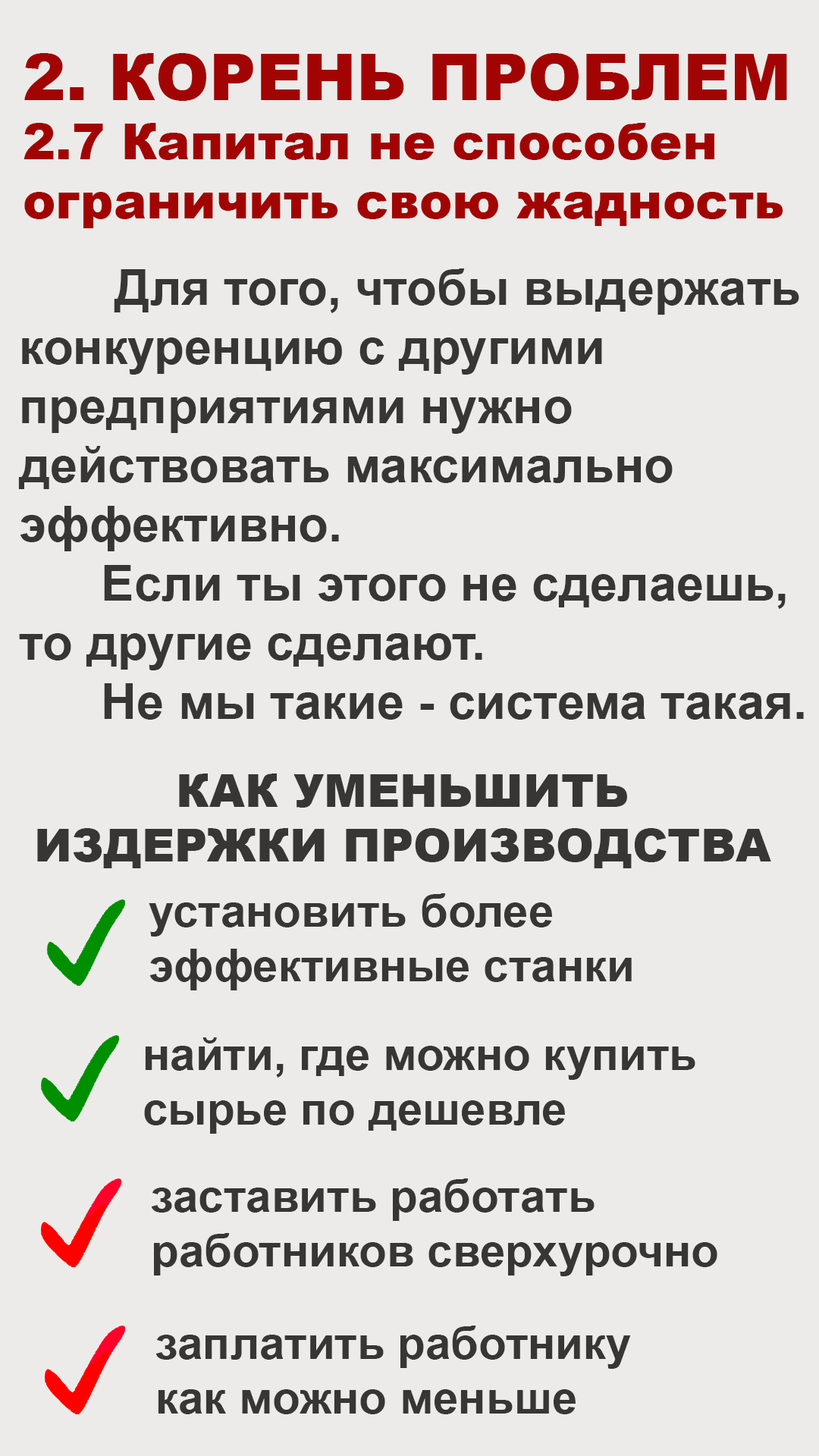
<style>
.page{position:relative;width:819px;height:1456px;background:#ecebe9}
.page>*{position:absolute;margin:0}
.t1{font:49.3px "Arial-Black";color:#a20403}
.t2{font:64.5px "Arial-Black";color:#a20403}
.t3{font:49.3px "Arial-BoldMT";color:#373634}
.t4{font:45.5px "Arial-Black";color:#373634}
.t5{font:45.5px "Arial-BoldMT";color:#373634}
</style>
<div class="page">
<p class="t1" style="left:24px;top:53px;width:763px;height:175px"><span class="t2">2. КОРЕНЬ ПРОБЛЕМ<br></span>2.7 Капитал не способен<br>ограничить свою жадность</p>
<p class="t3" style="left:18px;top:268px;width:786px;height:452px">Для того, чтобы выдержать<br>конкуренцию с другими<br>предприятиями нужно <br>действовать максимально<br>эффективно.<br>      Если ты этого не сделаешь,<br>то другие сделают.<br>      Не мы такие - система такая.</p>
<p class="t4" style="left:37px;top:773px;width:734px;height:95px;text-align:center">КАК УМЕНЬШИТЬ <br>ИЗДЕРЖКИ ПРОИЗВОДСТВА</p>
<p class="t5" style="left:149px;top:893px;width:483px;height:97px">установить более<br>эффективные станки</p>
<p class="t5" style="left:144px;top:1037px;width:551px;height:97px">найти, где можно купить<br>сырье по дешевле</p>
<p class="t5" style="left:151px;top:1178px;width:566px;height:98px">заставить работать<br>работников сверхурочно</p>
<p class="t5" style="left:155px;top:1326px;width:476px;height:88px">заплатить работнику<br>как можно меньше</p>
</div>
